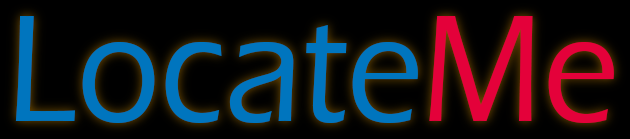
<style>
.page{position:relative;width:630px;height:139px;background:#000000}
.page>*{position:absolute;margin:0}
.t1{font:157px "ErasITC-Medium";color:#0075be;scale:0.9 1}
.t2{font:157px "ErasITC-Medium";color:#e4013a;scale:0.9 1}
</style>
<div class="page">
<p class="t1" style="left:15px;top:16px;width:599px;height:107px">Locate<span class="t2">Me</span></p>
</div>
